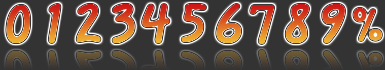
<style>
.page{position:relative;width:385px;height:70px;background:#333333}
.page>*{position:absolute;margin:0}
.t1{font:56.2px "QuillScript-Normal";letter-spacing:0.16em;font-variant:small-caps;font-weight:bold}
.t2{font:56.2px "QuillScript-Normal";letter-spacing:0.12em;font-variant:small-caps;font-weight:bold}
.t3{font:56.2px "QuillScript-Normal";letter-spacing:0.14em;font-variant:small-caps;font-weight:bold}
.t4{font:56.2px "QuillScript-Normal";letter-spacing:0.06em;font-variant:small-caps;font-weight:bold}
.t5{font:56.2px "QuillScript-Normal";letter-spacing:0.2em;font-variant:small-caps;font-weight:bold}
.t6{font:56.2px "QuillScript-Normal";letter-spacing:0.1em;font-variant:small-caps;font-weight:bold}
.t7{font:47.2px "QuillScript-Normal";letter-spacing:0.04em;font-variant:small-caps;font-weight:bold}
</style>
<div class="page">
<p class="t1" style="left:6px;top:4px;width:376px;height:40px">0<span class="t2">1</span><span class="t3">2</span><span class="t4">3</span><span class="t5">4</span><span class="t6">5</span><span class="t3">6</span><span class="t2">7</span>8<span class="t4">9</span><span class="t7">%</span></p>
</div>
